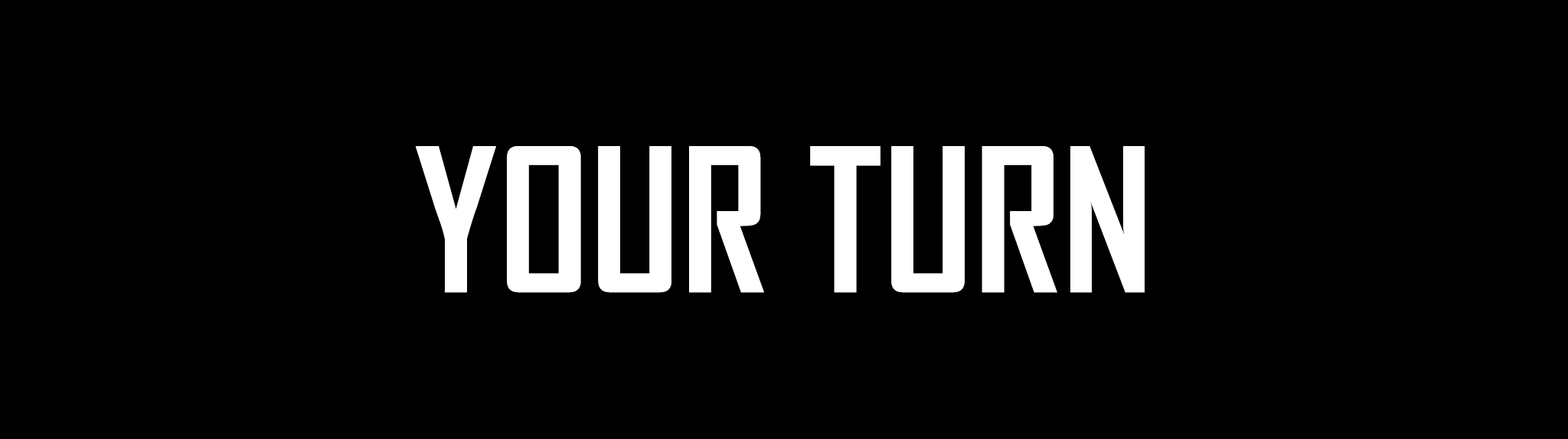
<style>
.page{position:relative;width:1568px;height:439px;background:#000000}
.page>*{position:absolute;margin:0}
.t1{font:191.4px "AgencyFB-Bold";color:#ffffff}
</style>
<div class="page">
<p class="t1" style="left:416px;top:146px;width:729px;height:147px">YOUR TURN</p>
</div>
